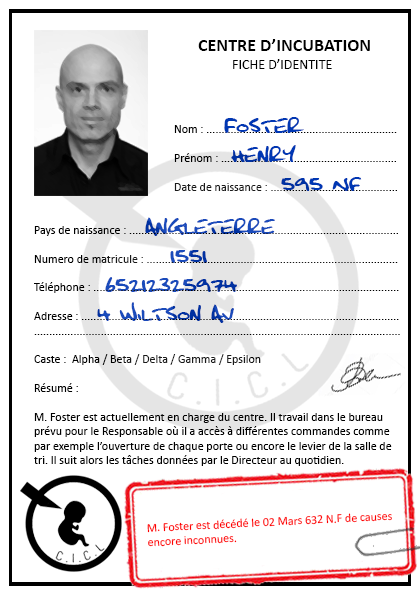
<style>
.page{position:relative;width:420px;height:595px;background:#ffffff}
.page>*{position:absolute;margin:0}
.t1{font:18px "Calibri-Bold";color:#000000}
.t2{font:14px "Calibri";color:#000000}
.t3{font:12px "Calibri"}
.t4{font:20px "FatboySlimBLTC(BRK)";color:#0037b3}
.t5{font:20px "FatboySlimBLTC(BRK)";color:#1a4bbb}
.t6{font:12px "Calibri";color:#000000}
.t7{font:20px "FatboySlimBLTC(BRK)"}
.t8{font:12px "Calibri";color:#fe0000}
</style>
<div class="page">
<p class="t1" style="left:198px;top:39px;width:172px;height:12px">CENTRE D’INCUBATION</p>
<p class="t2" style="left:233px;top:59px;width:99px;height:10px">FICHE D’IDENTITE</p>
<p class="t3" style="left:174px;top:125px;width:223px;height:66px">Nom : ...............................................................<br><br>Prénom : ..........................................................<br><br>Date de naissance : ..........................................</p>
<p class="t4" style="left:224px;top:117px;width:80px;height:16px">FOSTER</p>
<p class="t4" style="left:231px;top:145px;width:65px;height:17px">hENRY</p>
<p class="t4" style="left:281px;top:177px;width:81px;height:14px">595 nf</p>
<p class="t5" style="left:145px;top:217px;width:130px;height:19px">ANGLETERRE</p>
<p class="t6" style="left:34px;top:226px;width:366px;height:240px">Pays de naissance : .........................................................................................<br><br>Numero de matricule : ...................................................................................<br><br>Téléphone : .....................................................................................................<br><br>Adresse : .........................................................................................................<br>.........................................................................................................................<br><br>Caste :  Alpha / Beta / Delta / Gamma / Epsilon <br><br>Résumé :<br><br>M. Foster est actuellement en charge du centre. Il travail dans le bureau <br>prévu pour le Responsable où il a accès à différentes commandes comme<br>par exemple l’ouverture de chaque porte ou encore le levier de la salle de<br>tri. Il suit alors les tâches données par le Directeur au quotidien.</p>
<p class="t7" style="left:170px;top:250px;width:37px;height:13px">1551</p>
<p class="t7" style="left:105px;top:277px;width:132px;height:15px">65212325974</p>
<p class="t7" style="left:97px;top:302px;width:137px;height:21px">4 WILTSON AV</p>
<p class="t8" style="left:147px;top:513px;width:245px;height:34px;rotate:-3deg">M. Foster est décédé le 02 Mars 632 N.F de causes<br>encore inconnues.</p>
</div>
